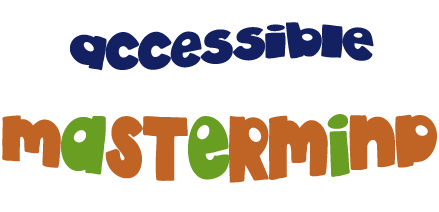
<style>
.page{position:relative;width:439px;height:212px;background:#ffffff}
.page>*{position:absolute;margin:0}
.t1{font:45px "akaDylanPlain";color:#132062}
.t2{font:45px "akaDylanPlain";color:#c06426}
.t3{font:45px "akaDylanPlain";color:#689e22}
</style>
<div class="page">
<p class="t1" style="left:70px;top:22px;width:304px;height:49px">accessible</p>
<p class="t2" style="left:2px;top:114px;width:435px;height:69px">M<span class="t3">A</span>ST<span class="t3">E</span>RM<span class="t3">I</span>ND</p>
</div>
